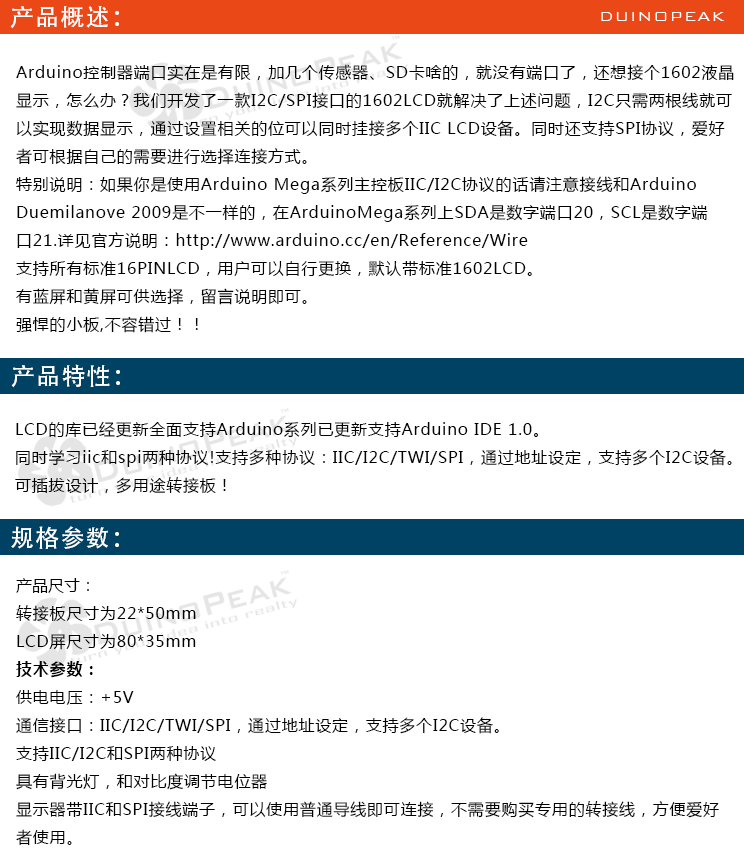
<style>
.page{position:relative;width:744px;height:861px;background:#ffffff}
.page>*{position:absolute;margin:0}
.t1{font:24px "AdobeHeitiStd-Regular";letter-spacing:0.05em;color:#ffffff}
.t2{font:18px "BankGothicBT-Light";letter-spacing:0.05em;color:#ffffff}
.t3{font:16px "MicrosoftYaHei";letter-spacing:0.05em;color:#000000}
.t4{font:16px "MicrosoftYaHei";color:#000000}
.t5{font:16px "MicrosoftYaHei-Bold";letter-spacing:0.05em;color:#000000}
</style>
<div class="page">
<p class="t1" style="left:10px;top:6px;width:109px;height:23px">产品概述：</p>
<p class="t2" style="left:601px;top:12px;width:124px;height:9px">DUINOPEAK</p>
<p class="t3" style="left:16px;top:64px;width:718px;height:269px">Arduino控制器端口实在是有限，加几个传感器、SD卡啥的，就没有端口了，还想接个1602液晶<br>显示，怎么办？我们开发了一款I2C/SPI接口的1602LCD就解决了上述问题，I2C只需两根线就可<br>以实现数据显示，通过设置相关的位可以同时挂接多个IIC LCD设备。同时还支持SPI协议，爱好<br>者可根据自己的需要进行选择连接方式。<br>特别说明：如果你是使用Arduino Mega系列主控板IIC/I2C协议的话请注意接线和Arduino <br>Duemilanove 2009是不一样的，在ArduinoMega系列上SDA是数字端口20，SCL是数字端<br>口21.详见官方说明：http://www.arduino.cc/en/Reference/Wire<br>支持所有标准16PINLCD，用户可以自行更换，默认带标准1602LCD。<br>有蓝屏和黄屏可供选择，留言说明即可。<br>强悍的小板,不容错过！！</p>
<p class="t1" style="left:11px;top:364px;width:109px;height:24px">产品特性：</p>
<p class="t3" style="left:15px;top:421px;width:717px;height:73px">LCD的库已经更新全面支持Arduino系列已更新支持Arduino IDE 1.0。<br>同时学习iic和spi两种协议!支持多种协议：IIC/I2C/TWI/SPI，通过地址设定，支持多个I2C设备。<br>可插拔设计，多用途转接板！</p>
<p class="t1" style="left:11px;top:526px;width:108px;height:23px">规格参数：</p>
<p class="t3" style="left:16px;top:578px;width:703px;height:268px"><span class="t4">产品尺寸：</span><br>转接板尺寸为22*50mm<br>LCD屏尺寸为80*35mm<br><span class="t5">技术参数：<br></span>供电电压：+5V<br>通信接口：IIC/I2C/TWI/SPI，通过地址设定，支持多个I2C设备。<br>支持IIC/I2C和SPI两种协议<br>具有背光灯，和对比度调节电位器<br>显示器带IIC和SPI接线端子，可以使用普通导线即可连接，不需要购买专用的转接线，方便爱好<br>者使用。</p>
</div>
